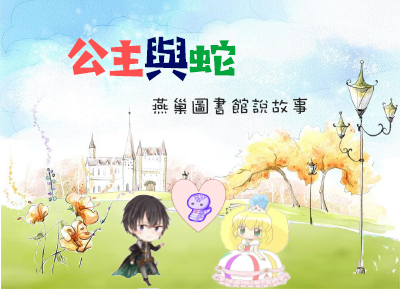
<style>
.page{position:relative;width:400px;height:289px}
.page>*{position:absolute;margin:0}
.t1{font:50px "HYZhuZiMuTouRenW";color:#ff5050}
.t2{font:50px "HYZhuZiMuTouRenW";color:#000963}
.t3{font:50px "HYZhuZiMuTouRenW";color:#00a63b}
.t4{font:20px "DFWaWaTC-W5";color:#282828}
</style>
<div class="page">
<p class="t1" style="left:67px;top:36px;width:169px;height:46px">公主<span class="t2">與</span><span class="t3">蛇</span></p>
<p class="t4" style="left:152px;top:97px;width:156px;height:18px">燕巢圖書館說故事</p>
</div>
